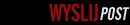
<style>
.page{position:relative;width:130px;height:25px;background:#000000}
.page>*{position:absolute;margin:0}
.t1{font:24px "AlternateGothicNo2BT-Regular";color:#9e0b0e;text-transform:uppercase}
.t2{font:18px "AlternateGothicNo2BT-Regular";color:#e5e5e5;text-transform:uppercase;font-style:italic}
</style>
<div class="page">
<p class="t1" style="left:49px;top:3px;width:49px;height:19px">wyslij</p>
<p class="t2" style="left:100px;top:7px;width:30px;height:13px">post</p>
</div>
